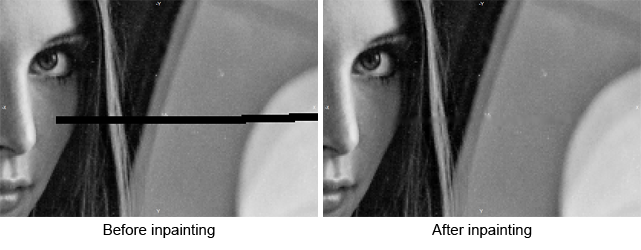
<style>
.page{position:relative;width:641px;height:250px}
.page>*{position:absolute;margin:0}
.t1{font:15px "ArialMT";color:#000000}
</style>
<div class="page">
<p class="t1" style="left:103px;top:224px;width:112px;height:14px">Before inpainting</p>
<p class="t1" style="left:432px;top:224px;width:100px;height:14px">After inpainting</p>
</div>
